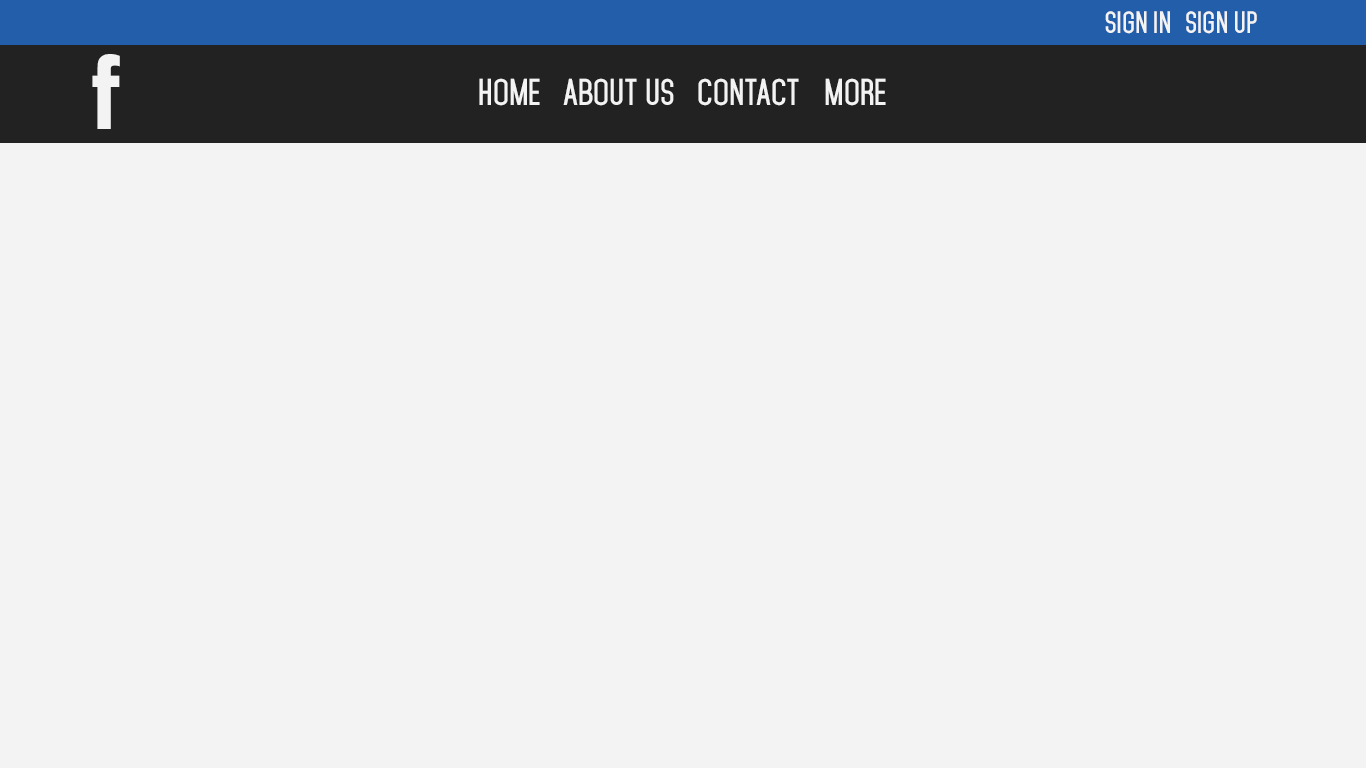
<style>
.page{position:relative;width:1366px;height:768px;background:#f3f3f3}
.page>*{position:absolute;margin:0}
.t1{font:26.8px "Mohave-Bold";color:#f3f3f3}
.t2{font:100px "CenturyGothic-Bold";color:#f3f3f3}
.t3{font:32.3px "Mohave-Bold";color:#f3f3f3}
</style>
<div class="page">
<p class="t1" style="left:1105px;top:11px;width:65px;height:23px">SIGN IN</p>
<p class="t1" style="left:1186px;top:11px;width:71px;height:23px">SIGN UP</p>
<p class="t2" style="left:92px;top:54px;width:28px;height:75px">f</p>
<p class="t3" style="left:479px;top:78px;width:61px;height:28px">HOME</p>
<p class="t3" style="left:563px;top:78px;width:111px;height:28px">ABOUT US</p>
<p class="t3" style="left:698px;top:78px;width:101px;height:28px">CONTACT</p>
<p class="t3" style="left:825px;top:78px;width:61px;height:28px">MORE</p>
</div>
